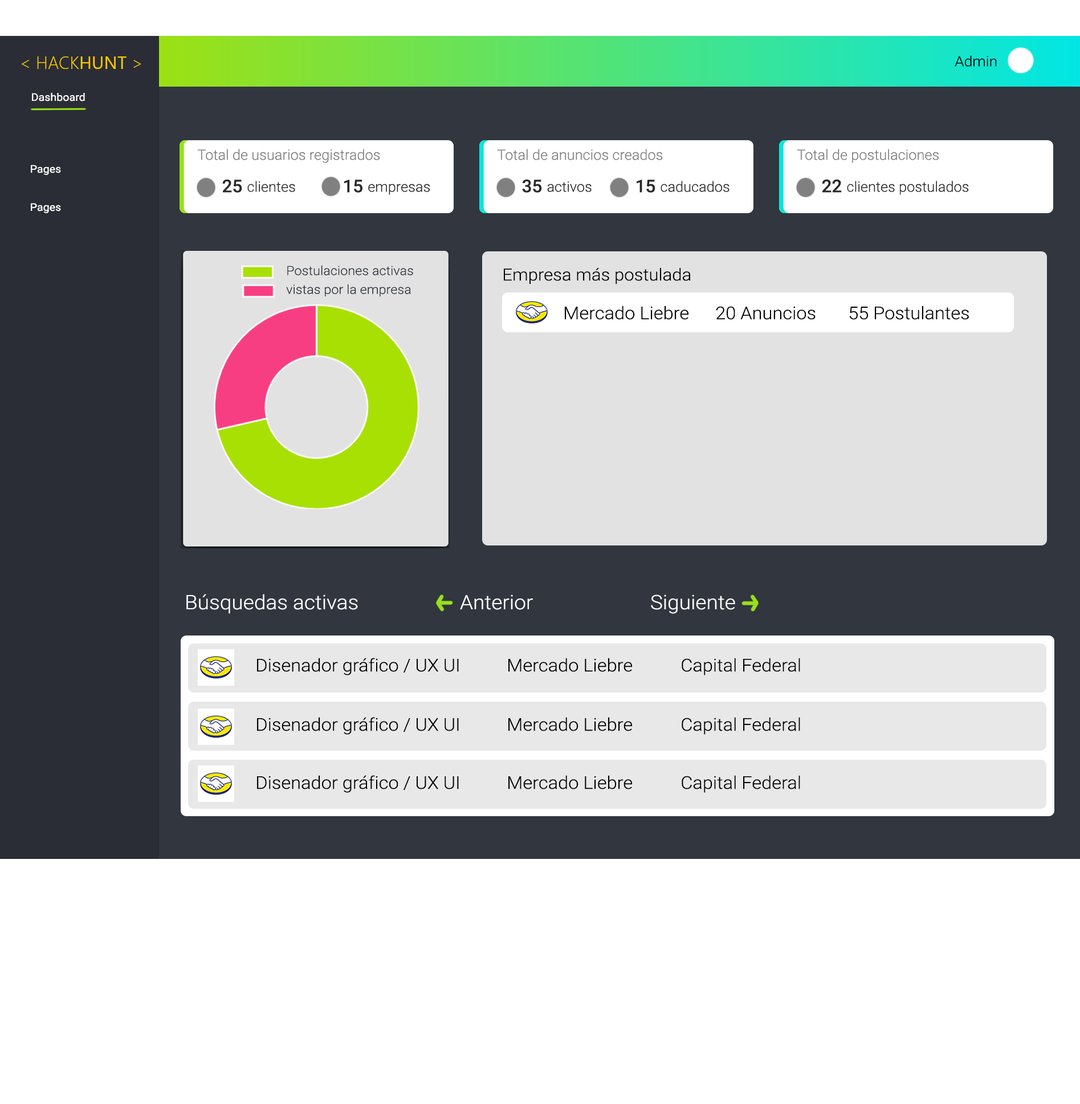
<style>
.page{position:relative;width:1080px;height:1104px;background:#ffffff}
.page>*{position:absolute;margin:0}
.t1{font:14.2px "Roboto-Light";color:#000000;scale:1.06 1}
.t2{font:10.6px "Roboto-Regular";color:#ffffff;scale:1.06 1}
.t3{font:14.2px "Roboto-Light";color:#808080}
.t4{font:17.7px "Roboto-Medium";color:#292929}
.t5{font:14.2px "Roboto-Light";color:#292929}
.t6{font:12.6px "Roboto-Light";color:#31363f;scale:1.06 1}
.t7{font:16.8px "Roboto-Light";color:#000000;scale:1.06 1}
.t8{font:17.5px "Roboto-Light";color:#000000;scale:1.06 1}
.t9{font:19.9px "Roboto-Light";color:#ffffff;scale:1.06 1}
</style>
<div class="page">
<p class="t1" style="left:955px;top:55px;width:42px;height:12px">Admin</p>
<p class="t2" style="left:32px;top:93px;width:53px;height:8px">Dashboard</p>
<p class="t3" style="left:197px;top:149px;width:183px;height:14px">Total de usuarios registrados</p>
<p class="t3" style="left:497px;top:149px;width:166px;height:11px">Total de anuncios creados</p>
<p class="t3" style="left:797px;top:149px;width:142px;height:14px">Total de postulaciones</p>
<p class="t2" style="left:31px;top:165px;width:30px;height:10px">Pages</p>
<p class="t4" style="left:222px;top:180px;width:20px;height:13px">25</p>
<p class="t5" style="left:247px;top:181px;width:48px;height:11px">clientes</p>
<p class="t4" style="left:344px;top:180px;width:18px;height:13px">15</p>
<p class="t5" style="left:368px;top:184px;width:62px;height:11px">empresas</p>
<p class="t4" style="left:522px;top:180px;width:20px;height:13px">35</p>
<p class="t5" style="left:547px;top:181px;width:45px;height:11px">activos</p>
<p class="t4" style="left:637px;top:180px;width:18px;height:13px">15</p>
<p class="t5" style="left:661px;top:181px;width:69px;height:11px">caducados</p>
<p class="t4" style="left:822px;top:180px;width:20px;height:13px">22</p>
<p class="t5" style="left:847px;top:181px;width:122px;height:14px">clientes postulados</p>
<p class="t2" style="left:31px;top:203px;width:30px;height:10px">Pages</p>
<p class="t6" style="left:287px;top:265px;width:126px;height:10px">Postulaciones activas</p>
<p class="t7" style="left:504px;top:268px;width:187px;height:16px">Empresa más postulada</p>
<p class="t6" style="left:286px;top:284px;width:125px;height:13px">vistas por la empresa</p>
<p class="t8" style="left:565px;top:306px;width:124px;height:14px">Mercado Liebre</p>
<p class="t8" style="left:849px;top:306px;width:120px;height:14px">55 Postulantes</p>
<p class="t8" style="left:716px;top:306px;width:100px;height:14px">20 Anuncios</p>
<p class="t9" style="left:186px;top:594px;width:172px;height:20px">Búsquedas activas</p>
<p class="t9" style="left:460px;top:594px;width:73px;height:16px">Anterior</p>
<p class="t9" style="left:651px;top:594px;width:84px;height:20px">Siguiente</p>
<p class="t8" style="left:257px;top:658px;width:202px;height:17px">Disenador gráfico / UX UI</p>
<p class="t8" style="left:508px;top:658px;width:124px;height:14px">Mercado Liebre</p>
<p class="t8" style="left:682px;top:658px;width:118px;height:17px">Capital Federal</p>
<p class="t8" style="left:257px;top:717px;width:202px;height:18px">Disenador gráfico / UX UI</p>
<p class="t8" style="left:508px;top:717px;width:124px;height:14px">Mercado Liebre</p>
<p class="t8" style="left:682px;top:717px;width:118px;height:18px">Capital Federal</p>
<p class="t8" style="left:257px;top:775px;width:202px;height:18px">Disenador gráfico / UX UI</p>
<p class="t8" style="left:508px;top:775px;width:124px;height:14px">Mercado Liebre</p>
<p class="t8" style="left:682px;top:775px;width:118px;height:18px">Capital Federal</p>
</div>
